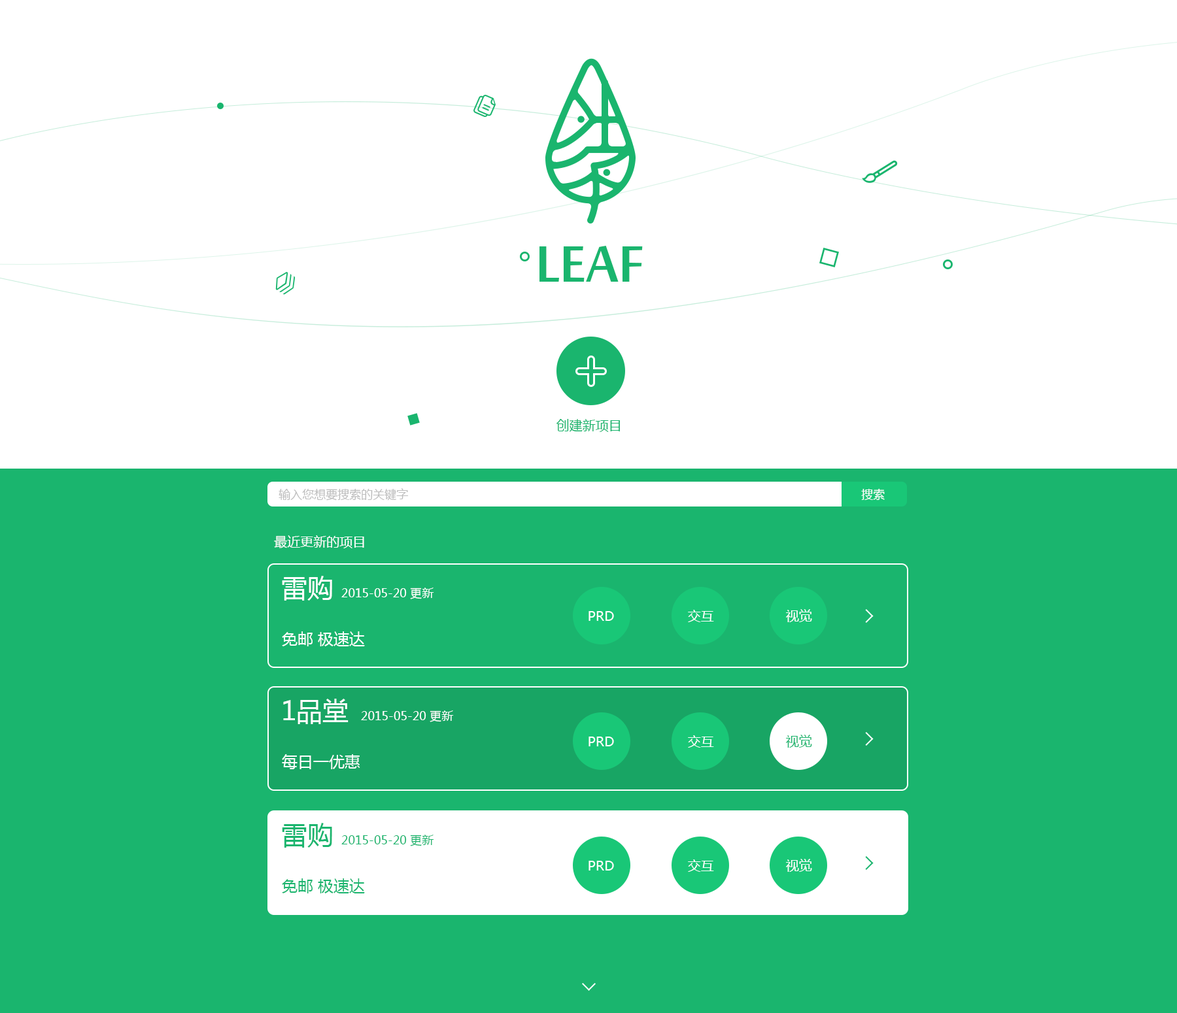
<style>
.page{position:relative;width:1177px;height:1013px;background:#ffffff}
.page>*{position:absolute;margin:0}
.t1{font:78.5px "MoolBoran";color:#1ab56e}
.t2{font:13.1px "MicrosoftYaHei";color:#1ab56e}
.t3{font:11.8px "MicrosoftYaHei";color:#bdbdbd}
.t4{font:11.8px "MicrosoftYaHei";color:#ffffff}
.t5{font:13.1px "MicrosoftYaHei";color:#ffffff}
.t6{font:26.2px "MicrosoftYaHei";color:#ffffff}
.t7{font:15.7px "MicrosoftYaHei";color:#ffffff}
.t8{font:26.2px "MicrosoftYaHei";color:#1ab56e}
.t9{font:11.8px "MicrosoftYaHei";color:#1ab56e}
.t10{font:15.7px "MicrosoftYaHei";color:#1ab56e}
</style>
<div class="page">
<p class="t1" style="left:539px;top:246px;width:104px;height:36px">LEAF</p>
<p class="t2" style="left:556px;top:419px;width:64px;height:13px">创建新项目</p>
<p class="t3" style="left:278px;top:488px;width:131px;height:13px">输入您想要搜索的关键字</p>
<p class="t4" style="left:861px;top:488px;width:24px;height:13px">搜索</p>
<p class="t5" style="left:274px;top:535px;width:90px;height:14px">最近更新的项目</p>
<p class="t6" style="left:282px;top:576px;width:50px;height:25px">雷购</p>
<p class="t4" style="left:341px;top:588px;width:93px;height:11px">2015-05-20 更新</p>
<p class="t5" style="left:588px;top:611px;width:26px;height:10px">PRD</p>
<p class="t5" style="left:688px;top:610px;width:26px;height:12px">交互</p>
<p class="t5" style="left:786px;top:609px;width:26px;height:13px">视觉</p>
<p class="t7" style="left:282px;top:632px;width:83px;height:15px">免邮 极速达</p>
<p class="t6" style="left:283px;top:699px;width:65px;height:25px">1品堂</p>
<p class="t4" style="left:361px;top:711px;width:93px;height:11px">2015-05-20 更新</p>
<p class="t5" style="left:588px;top:737px;width:26px;height:10px">PRD</p>
<p class="t5" style="left:688px;top:735px;width:26px;height:13px">交互</p>
<p class="t2" style="left:786px;top:735px;width:26px;height:13px">视觉</p>
<p class="t7" style="left:282px;top:754px;width:78px;height:15px">每日一优惠</p>
<p class="t8" style="left:282px;top:823px;width:50px;height:25px">雷购</p>
<p class="t9" style="left:341px;top:835px;width:93px;height:12px">2015-05-20 更新</p>
<p class="t5" style="left:588px;top:861px;width:26px;height:10px">PRD</p>
<p class="t5" style="left:688px;top:860px;width:26px;height:12px">交互</p>
<p class="t5" style="left:786px;top:859px;width:26px;height:13px">视觉</p>
<p class="t10" style="left:282px;top:879px;width:83px;height:15px">免邮 极速达</p>
</div>
